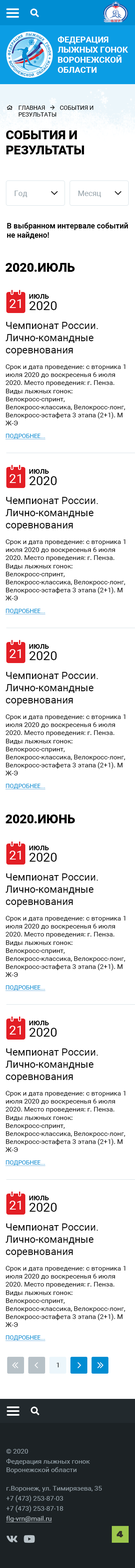
<style>
.page{position:relative;width:135px;height:1568px;background:#ffffff}
.page>*{position:absolute;margin:0}
.t1{font:8.4px "Roboto-Bold";color:#ffffff;text-transform:uppercase}
.t2{font:5.9px "Roboto-Regular";color:#000000;text-transform:uppercase}
.t3{font:12.6px "Roboto-Black";color:#000000;text-transform:uppercase}
.t4{font:7.6px "Roboto-Regular";color:#94a1a9}
.t5{font:7.6px "Roboto-Bold";color:#000000}
.t6{font:12.6px "Roboto-Regular";color:#ffffff;text-transform:uppercase}
.t7{font:6.7px "Roboto-Bold";color:#000000;text-transform:uppercase}
.t8{font:12.6px "Roboto-Regular";color:#000000;text-transform:uppercase}
.t9{font:10.1px "Roboto-Regular";color:#000000}
.t10{font:6.7px "Roboto-Regular";color:#000000}
.t11{font:5.9px/12.6px "Roboto-Regular";color:#008dd2;text-transform:uppercase;text-decoration:underline}
.t12{font:6.7px "Roboto-Regular";text-transform:uppercase}
.t13{font:6.7px/10.1px "Roboto-Regular";color:#94a1a9}
.t14{font:6.7px/8.4px "Roboto-Regular";color:#94a1a9}
.t15{font:6.7px/10.1px "Roboto-Regular";color:#b7c1c7;text-decoration:underline}
</style>
<div class="page">
<p class="t1" style="left:57px;top:36px;width:71px;height:37px">ФЕДЕРАЦИЯ <br>ЛЫЖНЫХ ГОНОК<br>воронежской <br>области</p>
<p class="t2" style="left:19px;top:106px;width:74px;height:11px">Главная          События и <br>результаты</p>
<p class="t3" style="left:6px;top:130px;width:78px;height:24px">события и <br>результаты</p>
<p class="t4" style="left:14px;top:191px;width:13px;height:6px">Год</p>
<p class="t4" style="left:78px;top:191px;width:23px;height:6px">Месяц</p>
<p class="t5" style="left:7px;top:223px;width:120px;height:16px">В выбранном интервале событий <br>не найдено!</p>
<p class="t3" style="left:5px;top:263px;width:69px;height:9px">2020.июль</p>
<p class="t6" style="left:9px;top:299px;width:12px;height:9px">21</p>
<p class="t7" style="left:29px;top:294px;width:20px;height:5px">июль</p>
<p class="t8" style="left:29px;top:301px;width:28px;height:9px">2020</p>
<p class="t9" style="left:5px;top:322px;width:93px;height:34px">Чемпионат России. Лично-командные соревнования</p>
<p class="t10" style="left:5px;top:364px;width:120px;height:76px">Срок и дата проведение: с вторника 1 июля 2020 до воскресенья 6 июля 2020. Место проведения: г. Пенза. Виды лыжных гонок: Велокросс-спринт, Велокросс-классика, Велокросс-лонг, Велокросс-эстафета 3 этапа (2+1). MЖ-Э<br><span class="t11">Подробнее...</span></p>
<p class="t7" style="left:29px;top:469px;width:20px;height:5px">июль</p>
<p class="t6" style="left:9px;top:474px;width:12px;height:9px">21</p>
<p class="t8" style="left:29px;top:476px;width:28px;height:9px">2020</p>
<p class="t9" style="left:5px;top:497px;width:93px;height:34px">Чемпионат России. Лично-командные соревнования</p>
<p class="t10" style="left:5px;top:539px;width:120px;height:76px">Срок и дата проведение: с вторника 1 июля 2020 до воскресенья 6 июля 2020. Место проведения: г. Пенза. Виды лыжных гонок: Велокросс-спринт, Велокросс-классика, Велокросс-лонг, Велокросс-эстафета 3 этапа (2+1). MЖ-Э<br><span class="t11">Подробнее...</span></p>
<p class="t6" style="left:9px;top:649px;width:12px;height:9px">21</p>
<p class="t7" style="left:29px;top:644px;width:20px;height:5px">июль</p>
<p class="t8" style="left:29px;top:651px;width:28px;height:9px">2020</p>
<p class="t9" style="left:5px;top:672px;width:93px;height:34px">Чемпионат России. Лично-командные соревнования</p>
<p class="t10" style="left:5px;top:714px;width:120px;height:76px">Срок и дата проведение: с вторника 1 июля 2020 до воскресенья 6 июля 2020. Место проведения: г. Пенза. Виды лыжных гонок: Велокросс-спринт, Велокросс-классика, Велокросс-лонг, Велокросс-эстафета 3 этапа (2+1). MЖ-Э<br><span class="t11">Подробнее...</span></p>
<p class="t3" style="left:5px;top:815px;width:70px;height:8px">2020.июнь</p>
<p class="t7" style="left:29px;top:846px;width:20px;height:4px">июль</p>
<p class="t6" style="left:9px;top:851px;width:12px;height:9px">21</p>
<p class="t8" style="left:29px;top:853px;width:28px;height:9px">2020</p>
<p class="t9" style="left:5px;top:873px;width:93px;height:34px">Чемпионат России. Лично-командные соревнования</p>
<p class="t10" style="left:5px;top:916px;width:120px;height:75px">Срок и дата проведение: с вторника 1 июля 2020 до воскресенья 6 июля 2020. Место проведения: г. Пенза. Виды лыжных гонок: Велокросс-спринт, Велокросс-классика, Велокросс-лонг, Велокросс-эстафета 3 этапа (2+1). MЖ-Э<br><span class="t11">Подробнее...</span></p>
<p class="t6" style="left:9px;top:1026px;width:12px;height:9px">21</p>
<p class="t7" style="left:29px;top:1021px;width:20px;height:4px">июль</p>
<p class="t8" style="left:29px;top:1028px;width:28px;height:9px">2020</p>
<p class="t9" style="left:5px;top:1048px;width:93px;height:34px">Чемпионат России. Лично-командные соревнования</p>
<p class="t10" style="left:5px;top:1091px;width:120px;height:75px">Срок и дата проведение: с вторника 1 июля 2020 до воскресенья 6 июля 2020. Место проведения: г. Пенза. Виды лыжных гонок: Велокросс-спринт, Велокросс-классика, Велокросс-лонг, Велокросс-эстафета 3 этапа (2+1). MЖ-Э<br><span class="t11">Подробнее...</span></p>
<p class="t6" style="left:9px;top:1201px;width:12px;height:9px">21</p>
<p class="t7" style="left:29px;top:1196px;width:20px;height:4px">июль</p>
<p class="t8" style="left:29px;top:1203px;width:28px;height:9px">2020</p>
<p class="t9" style="left:5px;top:1223px;width:93px;height:34px">Чемпионат России. Лично-командные соревнования</p>
<p class="t10" style="left:5px;top:1266px;width:120px;height:75px">Срок и дата проведение: с вторника 1 июля 2020 до воскресенья 6 июля 2020. Место проведения: г. Пенза. Виды лыжных гонок: Велокросс-спринт, Велокросс-классика, Велокросс-лонг, Велокросс-эстафета 3 этапа (2+1). MЖ-Э<br><span class="t11">Подробнее...</span></p>
<p class="t12" style="left:56px;top:1363px;width:2px;height:4px">1</p>
<p class="t13" style="left:6px;top:1449px;width:84px;height:24px">© 2020 <br>Федерация лыжных гонок <br><span class="t14">Воронежской области</span></p>
<p class="t13" style="left:6px;top:1486px;width:96px;height:37px">г.Воронеж, ул. Тимирязева, 35<br>+7 (473) 253-87-03<br>+7 (473) 253-87-18<br><span class="t15">flg-vrn@mail.ru</span></p>
</div>
